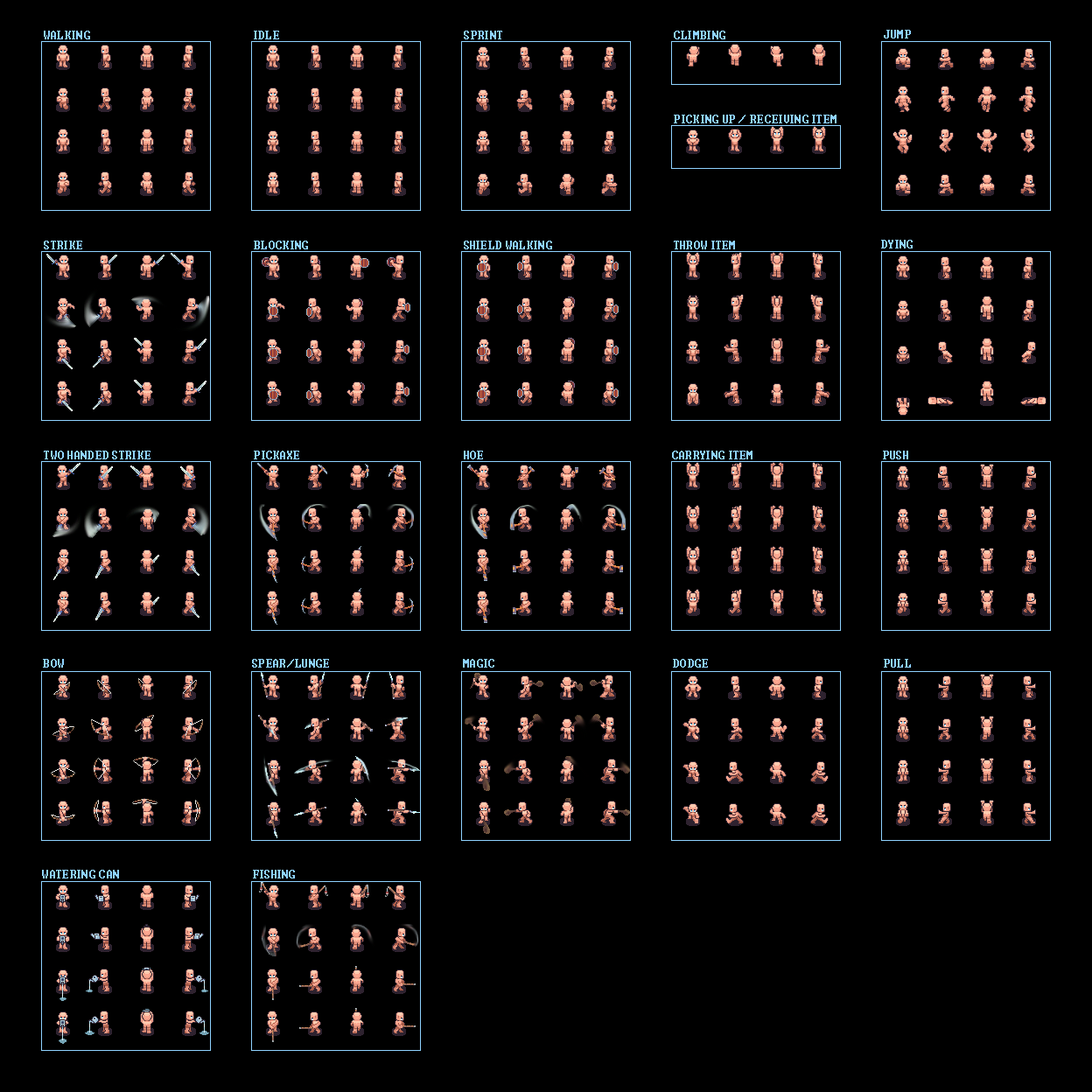
<style>
.page{position:relative;width:1092px;height:1092px;background:#000000}
.page>*{position:absolute;margin:0}
.t1{font:15.2px "Windows-Command-Prompt";color:#8fd3ff;scale:0.96 1}
</style>
<div class="page">
<p class="t1" style="left:884px;top:30px;width:27px;height:8px">JUMP</p>
<p class="t1" style="left:44px;top:31px;width:46px;height:8px">WALKING</p>
<p class="t1" style="left:254px;top:31px;width:25px;height:8px">IDLE</p>
<p class="t1" style="left:464px;top:31px;width:38px;height:8px">SPRINT</p>
<p class="t1" style="left:674px;top:31px;width:51px;height:8px">CLIMBING</p>
<p class="t1" style="left:674px;top:115px;width:162px;height:8px">PICKING UP / RECEIVING ITEM</p>
<p class="t1" style="left:44px;top:241px;width:38px;height:8px">STRIKE</p>
<p class="t1" style="left:254px;top:241px;width:54px;height:8px">BLOCKING</p>
<p class="t1" style="left:464px;top:241px;width:88px;height:8px">SHIELD WALKING</p>
<p class="t1" style="left:674px;top:241px;width:61px;height:8px">THROW ITEM</p>
<p class="t1" style="left:881px;top:240px;width:32px;height:8px">DYING</p>
<p class="t1" style="left:44px;top:451px;width:106px;height:8px">TWO HANDED STRIKE</p>
<p class="t1" style="left:254px;top:451px;width:45px;height:8px">PICKAXE</p>
<p class="t1" style="left:464px;top:451px;width:19px;height:8px">HOE</p>
<p class="t1" style="left:672px;top:451px;width:80px;height:8px">CARRYING ITEM</p>
<p class="t1" style="left:883px;top:451px;width:25px;height:8px">PUSH</p>
<p class="t1" style="left:43px;top:659px;width:21px;height:9px">BOW</p>
<p class="t1" style="left:252px;top:659px;width:77px;height:9px">SPEAR/LUNGE</p>
<p class="t1" style="left:463px;top:659px;width:31px;height:9px">MAGIC</p>
<p class="t1" style="left:673px;top:659px;width:35px;height:9px">DODGE</p>
<p class="t1" style="left:884px;top:659px;width:27px;height:9px">PULL</p>
<p class="t1" style="left:42px;top:870px;width:77px;height:8px">WATERING CAN</p>
<p class="t1" style="left:253px;top:870px;width:42px;height:8px">FISHING</p>
</div>
